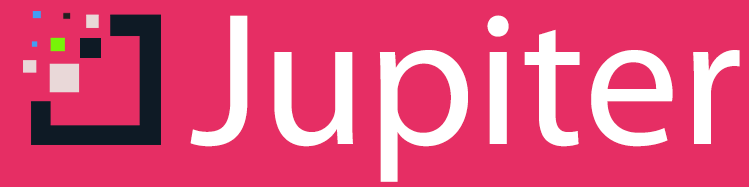
<style>
.page{position:relative;width:749px;height:187px;background:#e62e64}
.page>*{position:absolute;margin:0}
.t1{font:190px "MyriadPro-Regular";letter-spacing:0.005em;color:#ffffff}
</style>
<div class="page">
<p class="t1" style="left:190px;top:15px;width:550px;height:167px">Jupiter</p>
</div>
